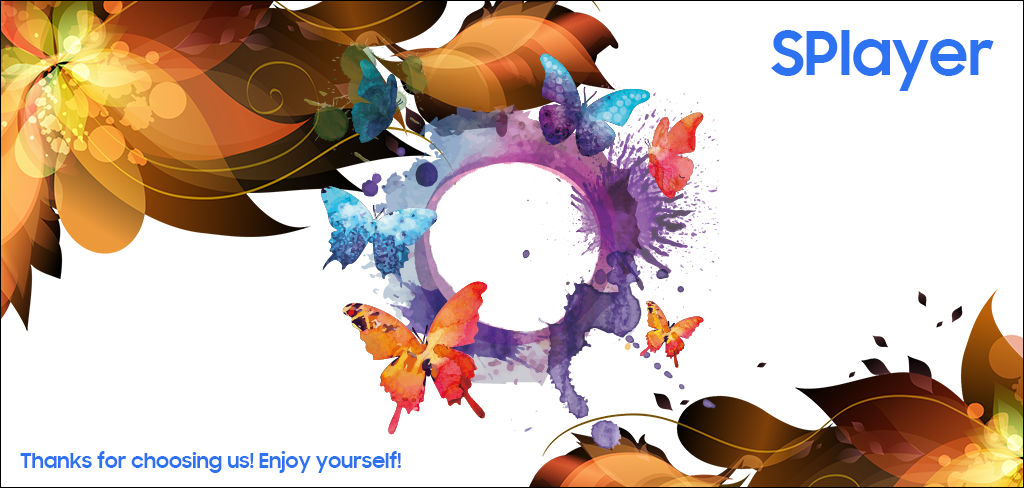
<style>
.page{position:relative;width:1024px;height:488px;background:#ffffff}
.page>*{position:absolute;margin:0}
.t1{font:60px "SamsungSharpSans-Bold";color:#2d72f1}
.t2{font:20px "SamsungSharpSans-Bold";color:#2d72f1}
</style>
<div class="page">
<p class="t1" style="left:771px;top:30px;width:223px;height:61px">SPlayer</p>
<p class="t2" style="left:20px;top:451px;width:381px;height:22px">Thanks for choosing us! Enjoy yourself!</p>
</div>
